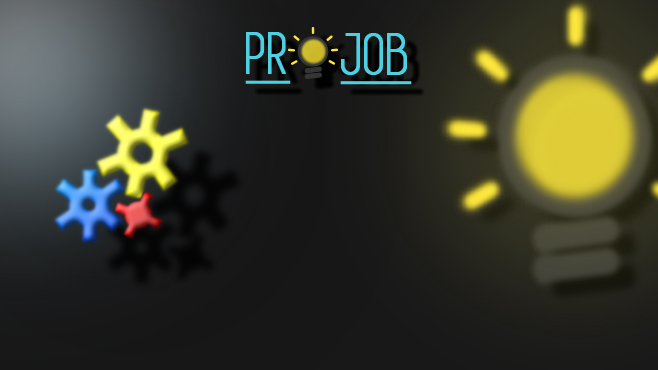
<style>
.page{position:relative;width:658px;height:370px}
.page>*{position:absolute;margin:0}
.t1{font:60px "Simplifica";color:#4dd0e1;font-weight:bold;text-decoration:underline}
</style>
<div class="page">
<p class="t1" style="left:245px;top:32px;width:46px;height:52px">PR</p>
<p class="t1" style="left:340px;top:33px;width:72px;height:52px">JOB</p>
</div>
